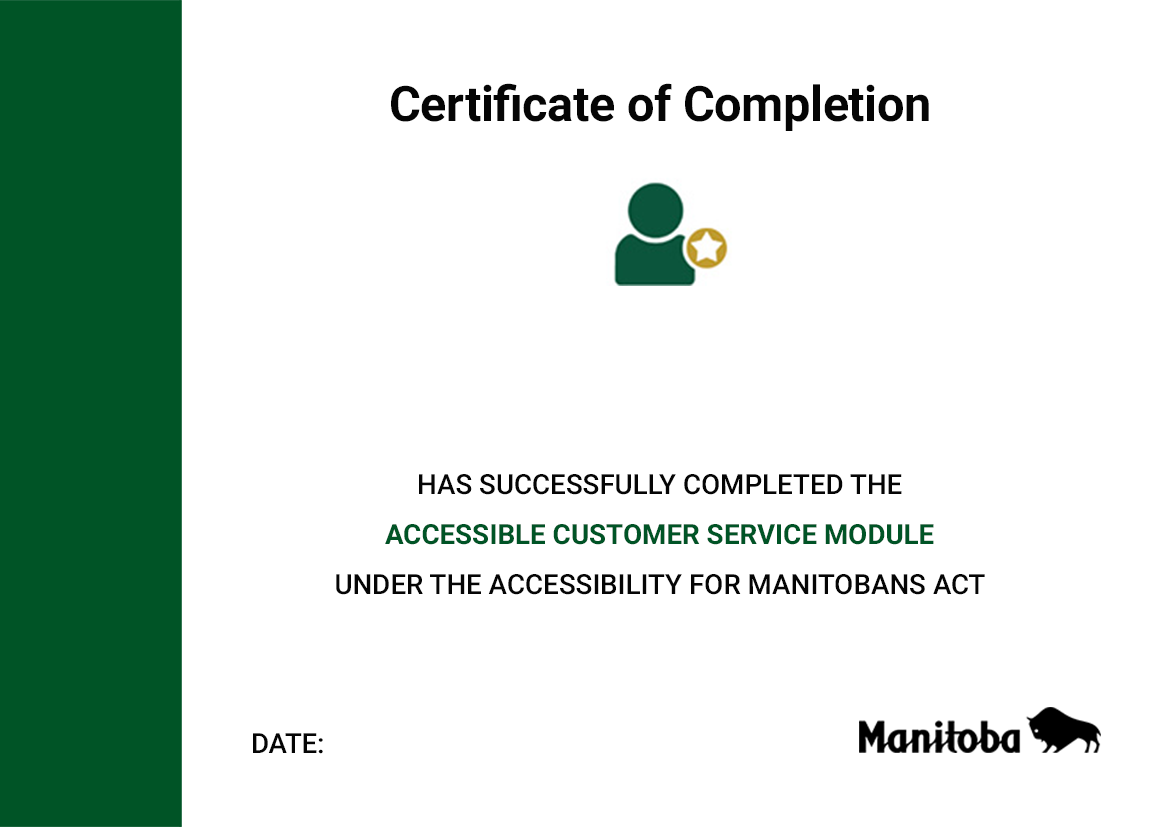
<style>
.page{position:relative;width:1169px;height:827px;background:#ffffff}
.page>*{position:absolute;margin:0}
.t1{font:48.9px "Roboto-Bold";letter-spacing:-0.01em;color:#050505}
.t2{font:27.8px/50px "Roboto-Medium";color:#050505}
.t3{font:27.8px/50px "Roboto-Bold";color:#005426}
.t4{font:27.8px "Roboto-Medium";letter-spacing:-0.01em;color:#050505}
</style>
<div class="page">
<p class="t1" style="left:391px;top:83px;width:538px;height:48px">Certificate of Completion</p>
<p class="t2" style="left:336px;top:474px;width:649px;height:121px;text-align:center">HAS SUCCESSFULLY COMPLETED THE<br><span class="t3">ACCESSIBLE CUSTOMER SERVICE MODULE<br></span>UNDER THE ACCESSIBILITY FOR MANITOBANS ACT</p>
<p class="t4" style="left:253px;top:733px;width:70px;height:21px">DATE:</p>
</div>
